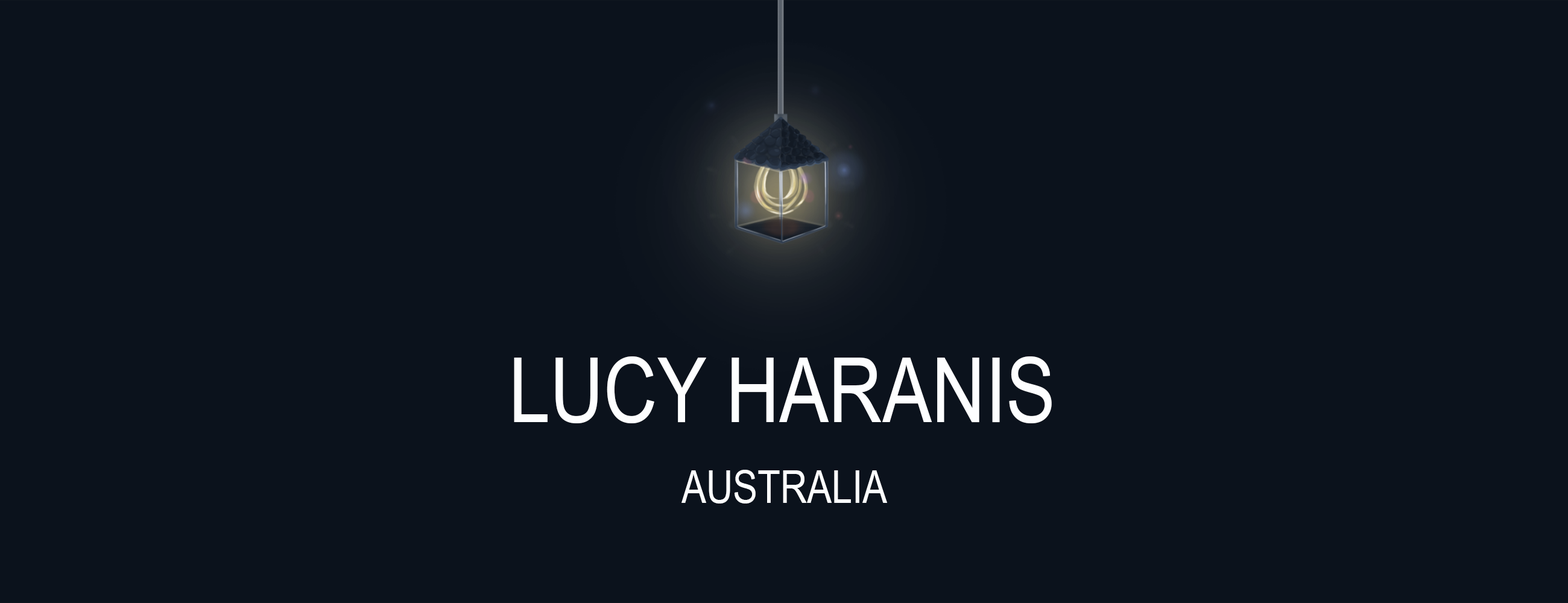
<style>
.page{position:relative;width:1568px;height:603px;background:#0b121c}
.page>*{position:absolute;margin:0}
.t1{font:90.5px "ArialNarrow";color:#fdfeff}
.t2{font:45.2px "ArialNarrow";color:#fdfeff}
</style>
<div class="page">
<p class="t1" style="left:514px;top:356px;width:538px;height:67px">LUCY HARANIS</p>
<p class="t2" style="left:681px;top:470px;width:206px;height:34px">AUSTRALIA</p>
</div>
